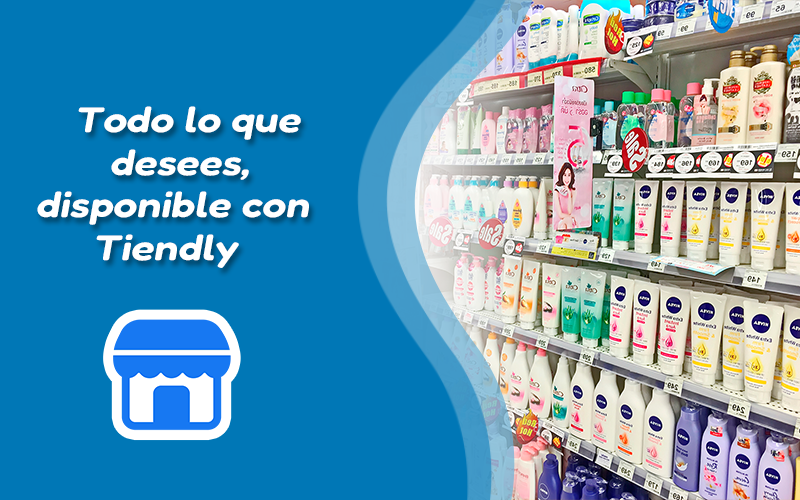
<style>
.page{position:relative;width:800px;height:500px;background:#0077b6}
.page>*{position:absolute;margin:0}
.t1{font:36px "Fredoka-SemiBold";color:#ffffff;scale:1.18 1}
</style>
<div class="page">
<p class="t1" style="left:37px;top:106px;width:272px;height:162px;text-align:center">Todo lo que<br>desees,<br>disponible con<br>Tiendly</p>
</div>
